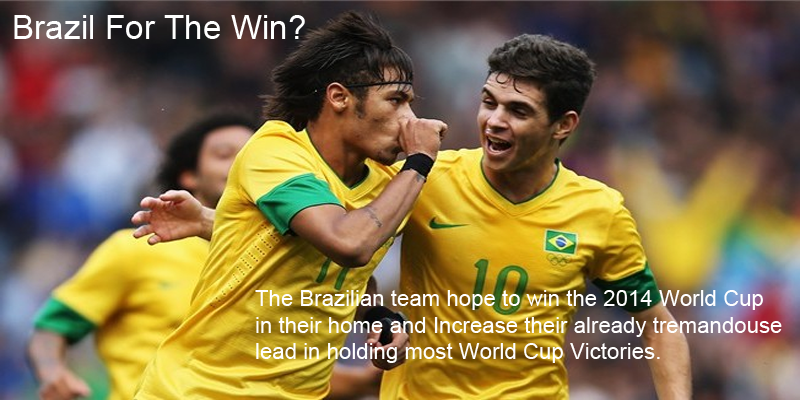
<style>
.page{position:relative;width:800px;height:400px}
.page>*{position:absolute;margin:0}
.t1{font:33.3px "ArialMT";color:#ffffff}
.t2{font:22.2px "ArialMT";color:#ffffff}
</style>
<div class="page">
<p class="t1" style="left:14px;top:15px;width:291px;height:24px">Brazil For The Win?</p>
<p class="t2" style="left:255px;top:290px;width:527px;height:73px">The Brazilian team hope to win the 2014 World Cup<br>in their home and Increase their already tremandouse<br>lead in holding most World Cup Victories.</p>
</div>
